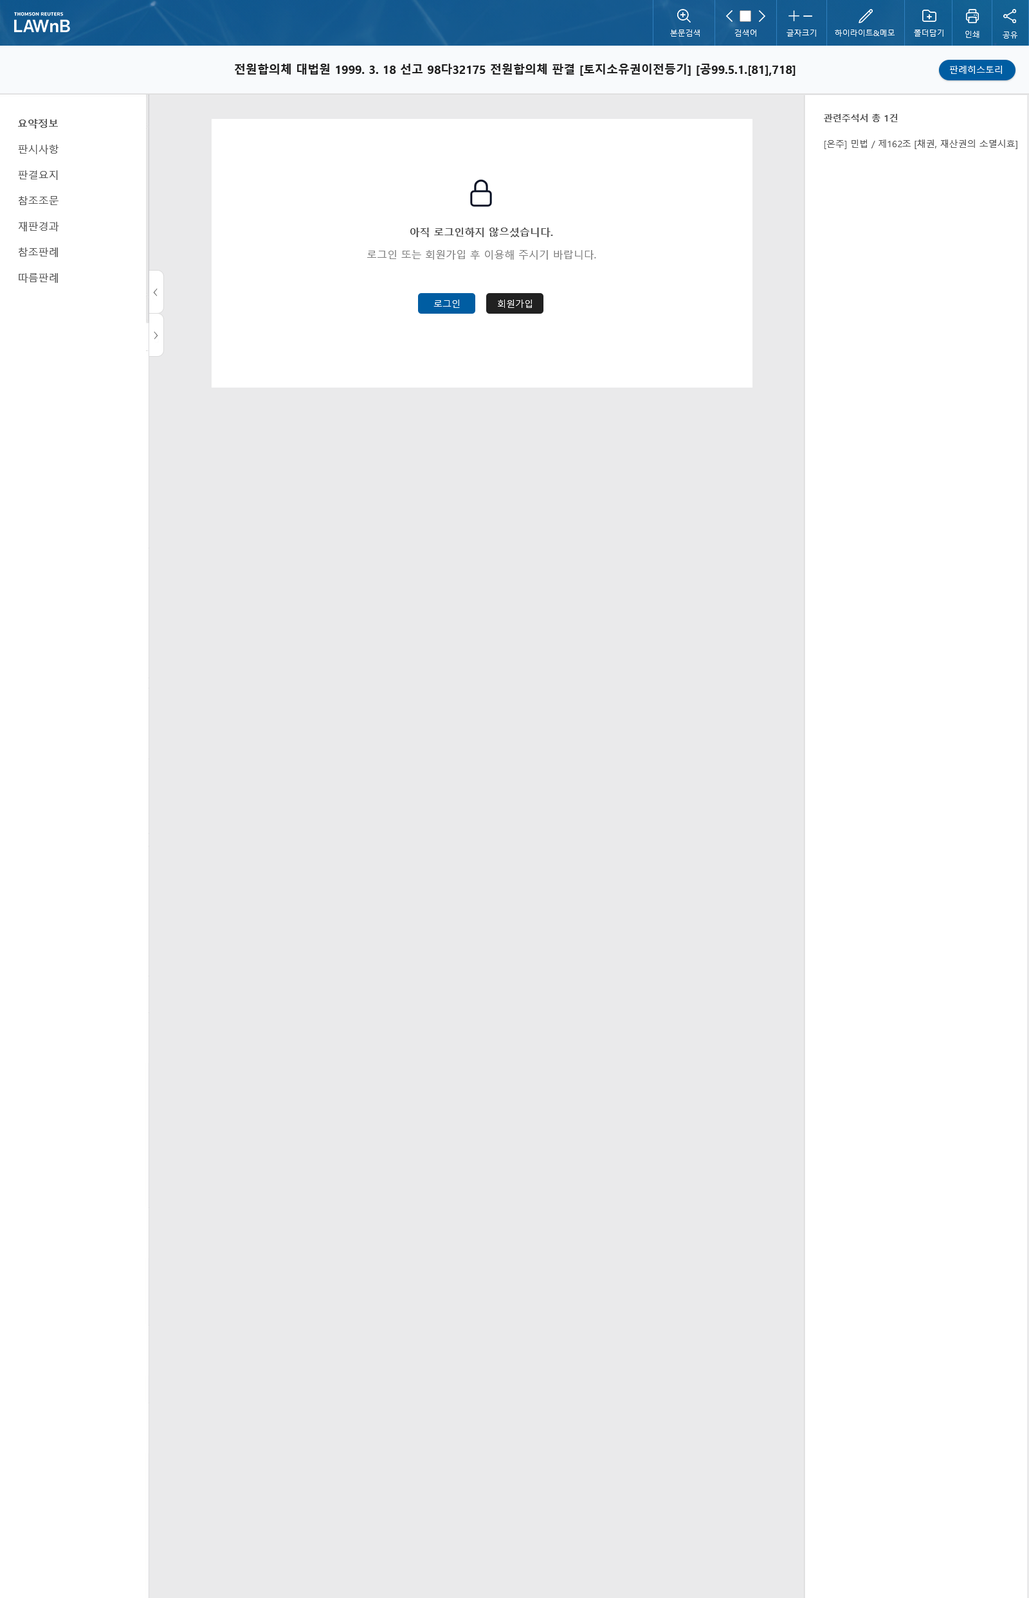
<style>
.page{position:relative;width:1029px;height:1598px;background:#eaeaeb}
.page>*{position:absolute;margin:0}
.t1{font:11.6px "MalgunGothicBold";color:#212121}
.t2{font:9px "MalgunGothic";color:#ffffff}
.t3{font:9px "MalgunGothicBold";color:#585858}
.t4{font:10.3px "MalgunGothicBold";color:#585858}
.t5{font:10.3px/25.7px "MalgunGothic";color:#585858}
.t6{font:9px "MalgunGothic";color:#585858}
.t7{font:10.3px/22.5px "MalgunGothic";color:#7f7f7f}
.t8{font:10.3px/22.5px "MalgunGothicBold";color:#585858}
</style>
<div class="page">
<p class="t1" style="left:235px;top:64px;width:560px;height:12px">전원합의체 대법원 1999. 3. 18 선고 98다32175 전원합의체 판결 [토지소유권이전등기] [공99.5.1.[81],718]</p>
<p class="t2" style="left:950px;top:66px;width:52px;height:8px">판례히스토리</p>
<p class="t3" style="left:824px;top:114px;width:73px;height:8px">관련주석서 총 1건</p>
<p class="t4" style="left:18px;top:119px;width:40px;height:10px">요약정보</p>
<p class="t5" style="left:18px;top:145px;width:41px;height:138px">판시사항<br>판결요지<br>참조조문<br>재판경과<br>참조판례<br>따름판례</p>
<p class="t6" style="left:824px;top:140px;width:193px;height:9px">[온주] 민법 / 제162조 [채권, 재산권의 소멸시효]</p>
<p class="t7" style="left:367px;top:228px;width:229px;height:32px;text-align:center"><span class="t8">아직 로그인하지 않으셨습니다.<br></span>로그인 또는 회원가입 후 이용해 주시기 바랍니다.</p>
<p class="t2" style="left:433px;top:300px;width:27px;height:8px">로그인</p>
<p class="t2" style="left:498px;top:300px;width:34px;height:8px">회원가입</p>
</div>
